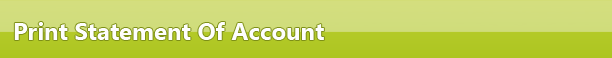
<style>
.page{position:relative;width:612px;height:58px}
.page>*{position:absolute;margin:0}
.t1{font:24px "SegoeUI-Bold";color:#fefefe}
</style>
<div class="page">
<p class="t1" style="left:14px;top:22px;width:310px;height:18px">Print Statement Of Account</p>
</div>
